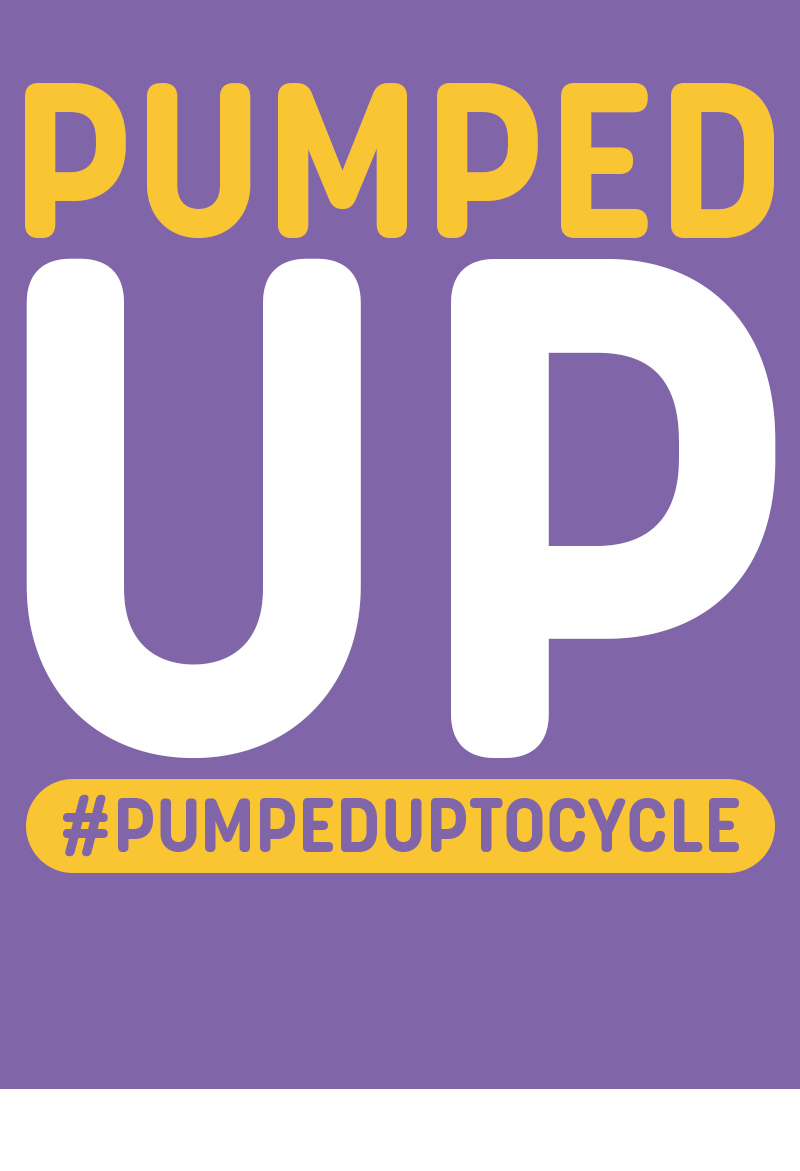
<style>
.page{position:relative;width:800px;height:1171px;background:#8065a9}
.page>*{position:absolute;margin:0}
.t1{font:219.5px "KorolevRounded-Bold";color:#fac533;text-transform:uppercase}
.t2{font:707.6px "KorolevRounded-Bold";color:#ffffff;text-transform:uppercase}
</style>
<div class="page">
<p class="t1" style="left:25px;top:83px;width:749px;height:155px">Pumped</p>
<p class="t2" style="left:26px;top:258px;width:750px;height:501px">up</p>
</div>
